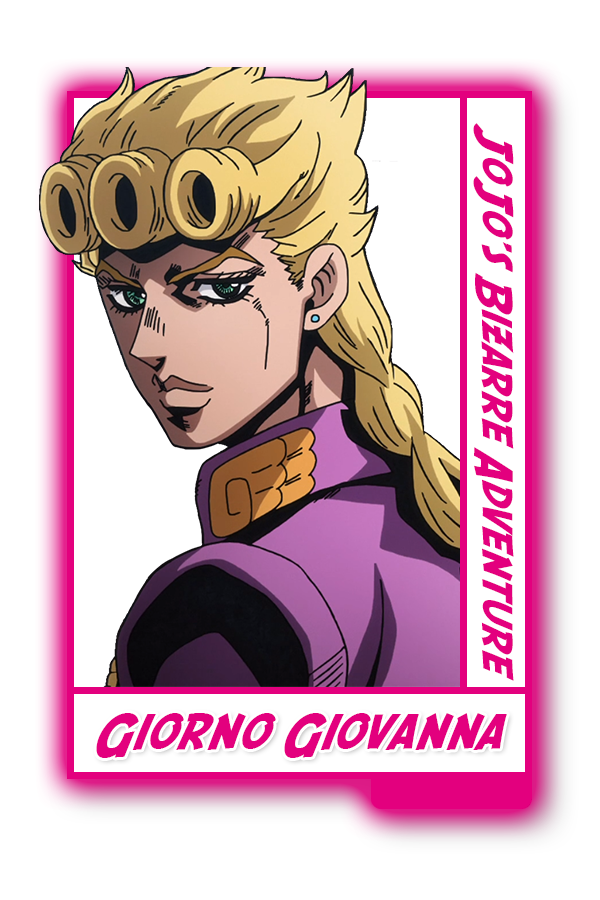
<style>
.page{position:relative;width:600px;height:900px;background:#ffffff}
.page>*{position:absolute;margin:0}
.t1{font:42.4px "SFFedora";color:#e3007e}
.t2{font:50.5px "SFFedora";color:#e3007e}
</style>
<div class="page">
<p class="t1" style="left:473px;top:123px;width:41px;height:558px;rotate:90deg">JoJo's Bizarre Adventure</p>
<p class="t2" style="left:96px;top:713px;width:411px;height:45px">Giorno Giovanna</p>
</div>
